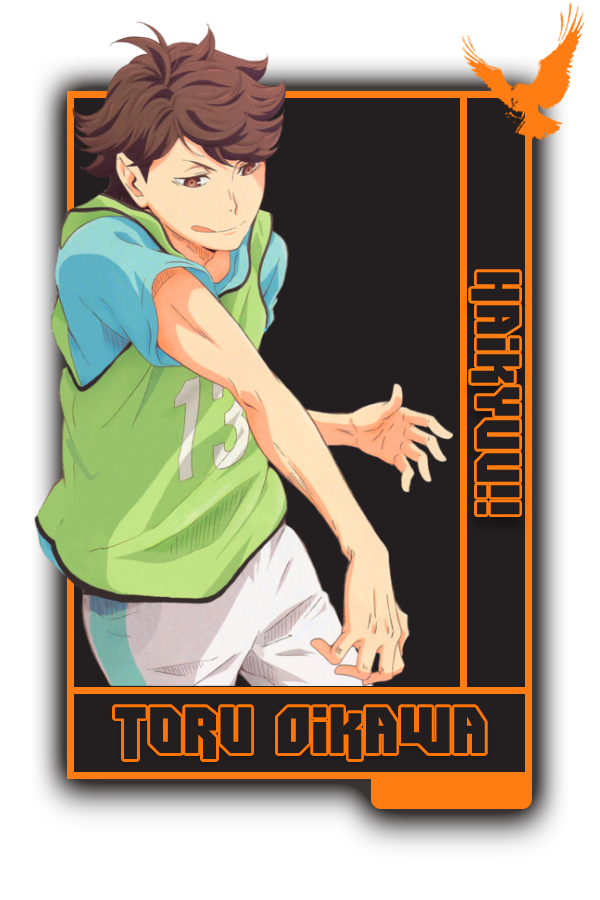
<style>
.page{position:relative;width:600px;height:900px;background:#231e1f}
.page>*{position:absolute;margin:0}
.t1{font:60.7px "Dimitri";color:#231f20}
.t2{font:65.2px "Dimitri";color:#231f20}
</style>
<div class="page">
<p class="t1" style="left:471px;top:272px;width:49px;height:243px;rotate:90deg">Haikyuu!!</p>
<p class="t2" style="left:114px;top:707px;width:371px;height:52px">Toru Oikawa</p>
</div>
